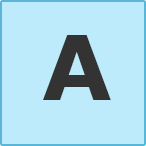
<style>
.page{position:relative;width:146px;height:146px;background:#beebfc}
.page>*{position:absolute;margin:0}
.t1{font:90px "Verdana-Bold";color:#333333}
</style>
<div class="page">
<p class="t1" style="left:43px;top:35px;width:68px;height:65px">A</p>
</div>
